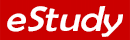
<style>
.page{position:relative;width:130px;height:40px;background:#cb0000}
.page>*{position:absolute;margin:0}
.t1{font:36px "BerlinSansFB-Reg";letter-spacing:-0.01em;color:#ffffff;font-style:italic;scale:1.13 1}
</style>
<div class="page">
<p class="t1" style="left:7px;top:6px;width:116px;height:31px">eStudy</p>
</div>
